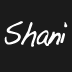
<style>
.page{position:relative;width:72px;height:72px;background:#1b1b1b}
.page>*{position:absolute;margin:0}
.t1{font:32.3px "Handwriting-Dakota";letter-spacing:-0.01em;color:#ffffff;font-weight:bold;scale:0.73 1}
</style>
<div class="page">
<p class="t1" style="left:4px;top:21px;width:64px;height:26px">Shani</p>
</div>
